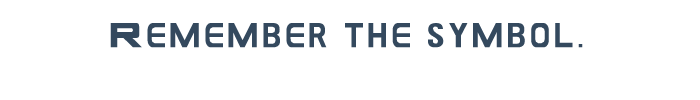
<style>
.page{position:relative;width:700px;height:100px;background:#ffffff}
.page>*{position:absolute;margin:0}
.t1{font:30px "GAMECUBENDualSet";color:#34495e}
.t2{font:14px "GAMECUBENDualSet";color:#34495e}
</style>
<div class="page">
<p class="t1" style="left:110px;top:23px;width:473px;height:25px"><span class="t2"><br></span>Remember the symbol.</p>
</div>
